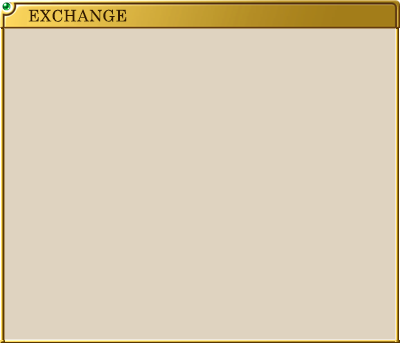
<style>
.page{position:relative;width:400px;height:343px;background:#dfd3c0}
.page>*{position:absolute;margin:0}
.t1{font:16px "CenturySchoolbook";letter-spacing:0.025em;color:#321a02}
</style>
<div class="page">
<p class="t1" style="left:28px;top:9px;width:99px;height:13px">EXCHANGE</p>
</div>
